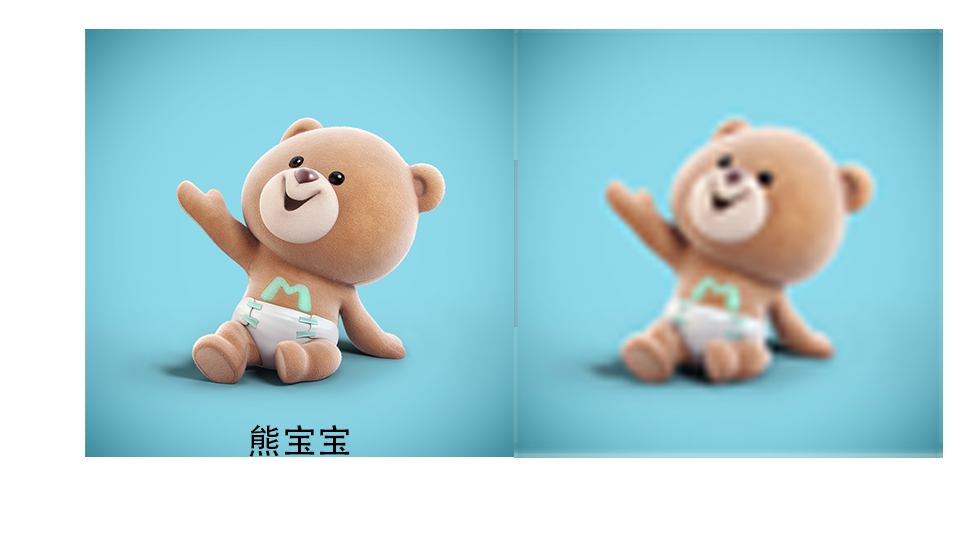
<style>
.page{position:relative;width:960px;height:540px;background:#ffffff}
.page>*{position:absolute;margin:0}
.t1{font:35px "AdobeHeitiStd-Regular";color:#000000;text-transform:uppercase}
</style>
<div class="page">
<p class="t1" style="left:249px;top:424px;width:101px;height:33px">熊宝宝</p>
</div>
